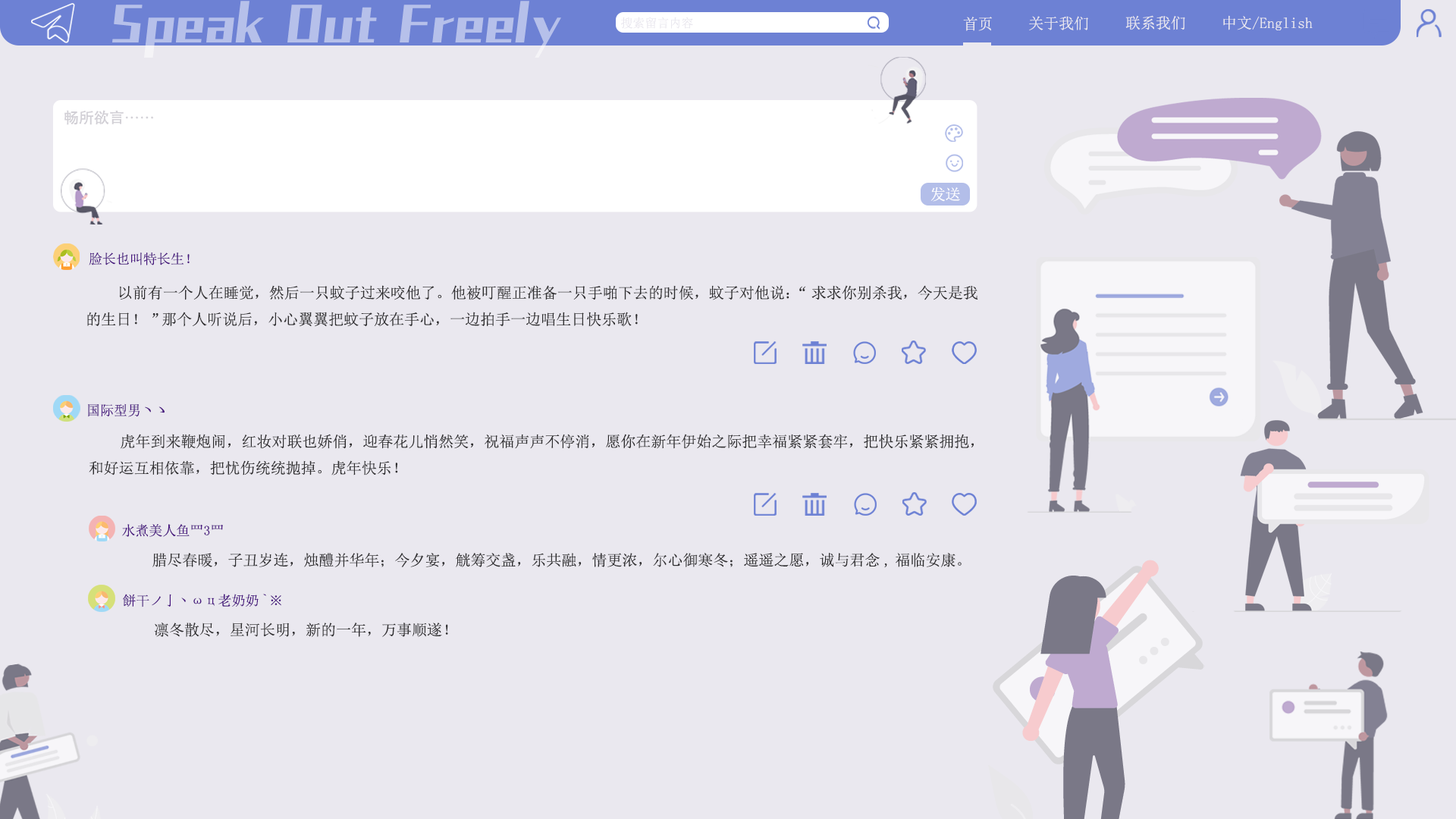
<style>
.page{position:relative;width:1456px;height:819px;background:#eae8ef}
.page>*{position:absolute;margin:0}
.t1{font:12.1px "SimSun";color:#eae8ef}
.t2{font:15.2px "SimSun";color:#eae8ef}
.t3{font:15.2px "AdobeHeitiStd-Regular";color:#d2d0d6}
.t4{font:15.2px "SimSun";color:#ffffff}
.t5{font:13.6px "SimSun";color:#48167f}
.t6{font:15.2px "SimSun";color:#2f2e30}
</style>
<div class="page">
<p class="t1" style="left:621px;top:17px;width:72px;height:12px">搜索留言内容</p>
<p class="t2" style="left:963px;top:17px;width:29px;height:14px">首页</p>
<p class="t2" style="left:1029px;top:16px;width:59px;height:14px">关于我们</p>
<p class="t2" style="left:1125px;top:15px;width:60px;height:15px">联系我们</p>
<p class="t2" style="left:1223px;top:15px;width:90px;height:15px">中文/English</p>
<p class="t3" style="left:64px;top:110px;width:90px;height:15px">畅所欲言……</p>
<p class="t4" style="left:930px;top:187px;width:30px;height:15px">发送</p>
<p class="t5" style="left:89px;top:252px;width:101px;height:13px">脸长也叫特长生！</p>
<p class="t6" style="left:87px;top:285px;width:891px;height:42px">以前有一个人在睡觉，然后一只蚊子过来咬他了。他被叮醒正准备一只手啪下去的时候，蚊子对他说：“求求你别杀我，今天是我<br>的生日！”那个人听说后，小心翼翼把蚊子放在手心，一边拍手一边唱生日快乐歌！</p>
<p class="t5" style="left:88px;top:403px;width:77px;height:14px">国际型男ヽゝ</p>
<p class="t6" style="left:89px;top:434px;width:885px;height:41px">虎年到来鞭炮闹，红妆对联也娇俏，迎春花儿悄然笑，祝福声声不停消，愿你在新年伊始之际把幸福紧紧套牢，把快乐紧紧拥抱，<br>和好运互相依靠，把忧伤统统抛掉。虎年快乐！</p>
<p class="t5" style="left:122px;top:524px;width:101px;height:13px">水煮美人鱼罒3罒</p>
<p class="t6" style="left:152px;top:553px;width:810px;height:15px">腊尽春暖，子丑岁连，烛醴并华年；今夕宴，觥筹交盏，乐共融，情更浓，尔心御寒冬；遥遥之愿，诚与君念,福临安康。</p>
<p class="t5" style="left:123px;top:594px;width:158px;height:13px">餅干ノ亅丶ωц老奶奶`※</p>
<p class="t6" style="left:154px;top:623px;width:294px;height:14px">凛冬散尽，星河长明，新的一年，万事顺遂！</p>
</div>
